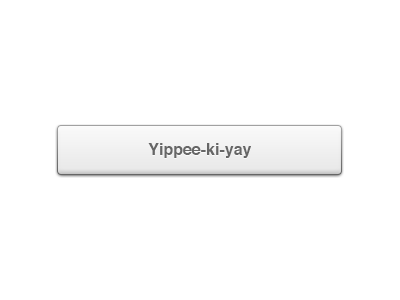
<style>
.page{position:relative;width:400px;height:300px;background:#ffffff}
.page>*{position:absolute;margin:0}
.t1{font:16px "Helvetica-Bold";color:#666666}
</style>
<div class="page">
<p class="t1" style="left:148px;top:143px;width:103px;height:15px">Yippee-ki-yay</p>
</div>
